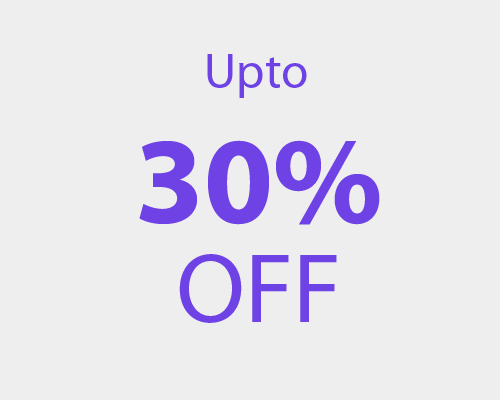
<style>
.page{position:relative;width:500px;height:400px;background:#eeeeee}
.page>*{position:absolute;margin:0}
.t1{font:50px "MyriadPro-Regular";color:#6e42e5}
.t2{font:125px "MyriadPro-Bold";color:#6e42e5}
.t3{font:100px "MyriadPro-Regular";color:#6e42e5}
</style>
<div class="page">
<p class="t1" style="left:207px;top:54px;width:100px;height:44px">Upto</p>
<p class="t2" style="left:139px;top:140px;width:241px;height:85px">30%</p>
<p class="t3" style="left:179px;top:254px;width:158px;height:69px">OFF</p>
</div>
